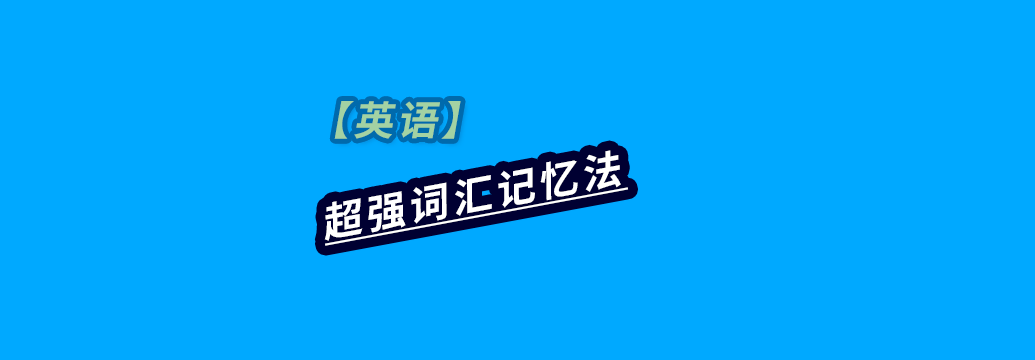
<style>
.page{position:relative;width:1035px;height:360px;background:#00a9ff}
.page>*{position:absolute;margin:0}
.t1{font:40px "SourceHanSansSC-Bold";letter-spacing:0.1em;color:#a3d2a3;font-style:italic}
.t2{font:40px "SourceHanSansSC-Bold";letter-spacing:0.1em;color:#ffffff;font-style:italic;text-decoration:underline}
</style>
<div class="page">
<p class="t1" style="left:334px;top:101px;width:127px;height:38px">【英语】</p>
<p class="t2" style="left:324px;top:150px;width:305px;height:96px;rotate:-11deg">超强词汇记忆法</p>
</div>
